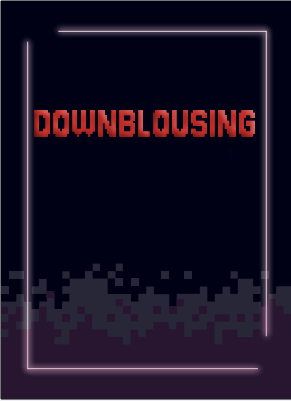
<style>
.page{position:relative;width:291px;height:401px;background:#000115}
.page>*{position:absolute;margin:0}
.t1{font:50px "Jersey10-Regular";letter-spacing:0.025em;scale:0.83 1}
</style>
<div class="page">
<p class="t1" style="left:34px;top:109px;width:221px;height:28px">DOWNBLOUSING</p>
</div>
